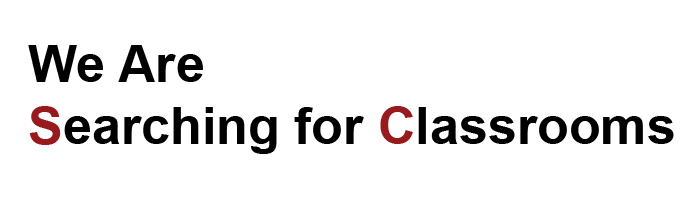
<style>
.page{position:relative;width:700px;height:200px;background:#ffffff}
.page>*{position:absolute;margin:0}
.t1{font:52px "Arial-BoldMT";color:#000000}
.t2{font:52px "Arial-BoldMT";color:#971a1d}
</style>
<div class="page">
<p class="t1" style="left:28px;top:45px;width:646px;height:109px">We Are<br><span class="t2">S</span>earching for <span class="t2">C</span>lassrooms</p>
</div>
